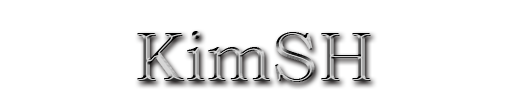
<style>
.page{position:relative;width:507px;height:112px;background:#ffffff}
.page>*{position:absolute;margin:0}
.t1{font:70px "BookmanOldStyle"}
</style>
<div class="page">
<p class="t1" style="left:137px;top:31px;width:234px;height:51px">KimSH</p>
</div>
